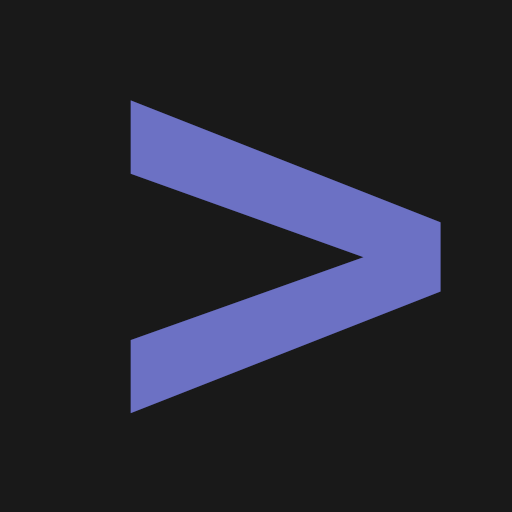
<style>
.page{position:relative;width:512px;height:512px;background:#191919}
.page>*{position:absolute;margin:0}
.t1{font:600px "Hack-Bold";color:#6c71c4}
</style>
<div class="page">
<p class="t1" style="left:130px;top:100px;width:311px;height:314px">&gt;</p>
</div>
